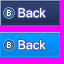
<style>
.page{position:relative;width:64px;height:64px;background:#ff00ff}
.page>*{position:absolute;margin:0}
.t1{font:20px "Kartika";color:#ffffff}
</style>
<div class="page">
<p class="t1" style="left:18px;top:8px;width:28px;height:10px">Back</p>
<p class="t1" style="left:18px;top:40px;width:28px;height:10px">Back</p>
</div>
